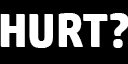
<style>
.page{position:relative;width:128px;height:64px;background:#000000}
.page>*{position:absolute;margin:0}
.t1{font:48.2px "HPSimplified-Bold";letter-spacing:-0.01em;color:#ffffff}
</style>
<div class="page">
<p class="t1" style="left:0px;top:13px;width:129px;height:35px">HURT?</p>
</div>
